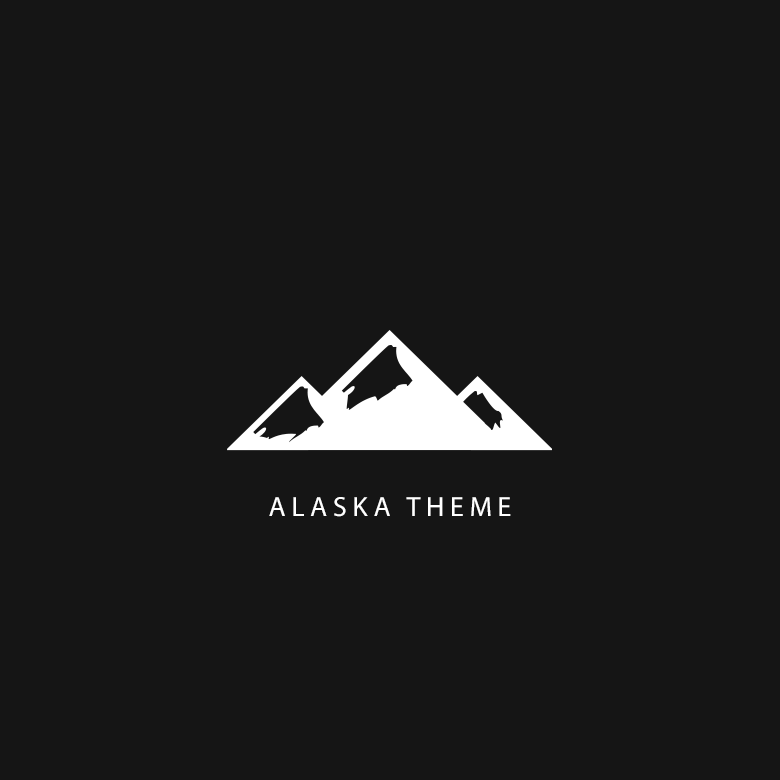
<style>
.page{position:relative;width:780px;height:780px;background:#151515}
.page>*{position:absolute;margin:0}
.t1{font:28px "MyriadPro-Regular";letter-spacing:0.2em;color:#ffffff;text-transform:uppercase}
</style>
<div class="page">
<p class="t1" style="left:269px;top:497px;width:242px;height:20px">ALASKA THEME</p>
</div>
